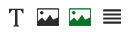
<style>
.page{position:relative;width:128px;height:32px;background:#ffffff}
.page>*{position:absolute;margin:0}
.t1{font:26.7px "Cambria";color:#2b2b2b}
</style>
<div class="page">
<p class="t1" style="left:9px;top:8px;width:15px;height:19px">T</p>
</div>
